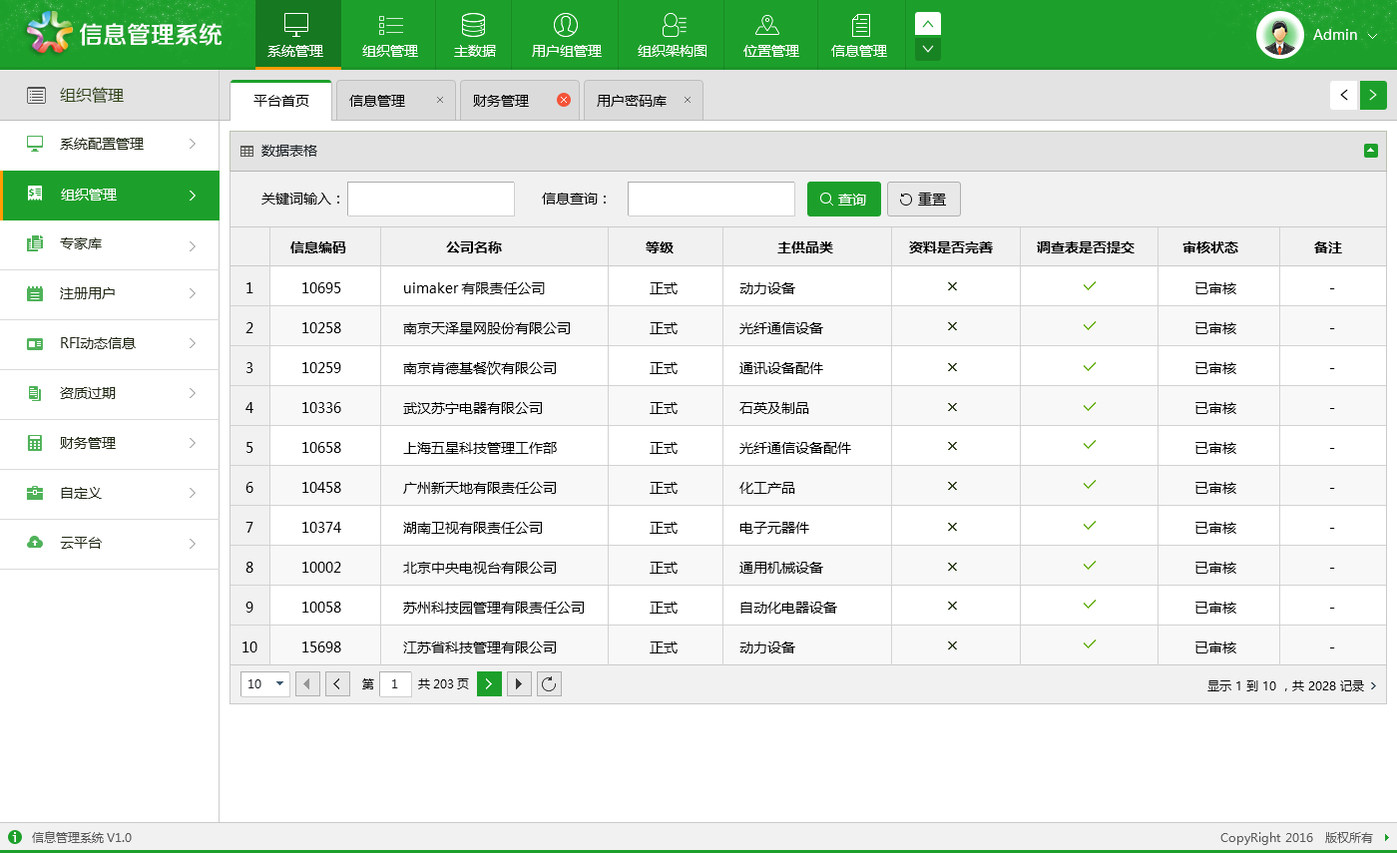
<style>
.page{position:relative;width:1397px;height:853px;background:#ffffff}
.page>*{position:absolute;margin:0}
.t1{font:24px "FZZZHUNHJW--GB1-0";color:#ffffff}
.t2{font:14px "MicrosoftYaHei";color:#ffffff}
.t3{font:16px "MicrosoftYaHei";color:#2d4112}
.t4{font:14px "MicrosoftYaHei";color:#000000}
.t5{font:14px/49.9px "MicrosoftYaHei";color:#202913}
.t6{font:14px "MicrosoftYaHei";color:#171e24}
.t7{font:14px "MicrosoftYaHei-Bold";color:#000000}
.t8{font:14px/39.9px "MicrosoftYaHei";color:#000000}
.t9{font:12px "MicrosoftYaHei";color:#171e24}
.t10{font:12px "MicrosoftYaHei";color:#000000}
.t11{font:12px "HeitiCSEG";color:#ffffff}
.t12{font:12px "MicrosoftYaHei";color:#585858}
</style>
<div class="page">
<p class="t1" style="left:80px;top:23px;width:142px;height:23px">信息管理系统</p>
<p class="t2" style="left:1313px;top:29px;width:44px;height:11px">Admin</p>
<p class="t2" style="left:267px;top:45px;width:56px;height:12px">系统管理</p>
<p class="t2" style="left:362px;top:45px;width:525px;height:12px">组织管理         主数据         用户组管理         组织架构图         位置管理        信息管理</p>
<p class="t3" style="left:60px;top:87px;width:64px;height:17px">组织管理</p>
<p class="t4" style="left:254px;top:95px;width:55px;height:12px">平台首页</p>
<p class="t4" style="left:349px;top:95px;width:56px;height:12px">信息管理</p>
<p class="t4" style="left:473px;top:95px;width:56px;height:12px">财务管理</p>
<p class="t4" style="left:597px;top:95px;width:70px;height:12px">用户密码库</p>
<p class="t5" style="left:60px;top:138px;width:84px;height:411px">系统配置管理<br><br>专家库<br>注册用户<br>RFI动态信息<br>资质过期<br>财务管理<br>自定义<br>云平台</p>
<p class="t6" style="left:261px;top:145px;width:56px;height:12px">数据表格</p>
<p class="t2" style="left:61px;top:189px;width:56px;height:12px">组织管理</p>
<p class="t4" style="left:261px;top:193px;width:78px;height:12px">关键词输入：</p>
<p class="t4" style="left:542px;top:193px;width:64px;height:12px">信息查询：</p>
<p class="t2" style="left:838px;top:194px;width:28px;height:12px">查询</p>
<p class="t4" style="left:918px;top:193px;width:28px;height:13px">重置</p>
<p class="t7" style="left:290px;top:242px;width:1052px;height:12px">信息编码                         公司名称                                    等级                          主供品类                   资料是否完善           调查表是否提交            审核状态                   备注</p>
<p class="t8" style="left:243px;top:282px;width:15px;height:371px;text-align:center">1<br>2<br>3<br>4<br>5<br>6<br>7<br>8<br>9<br>10</p>
<p class="t8" style="left:302px;top:282px;width:39px;height:371px">10695<br>10258<br>10259<br>10336<br>10658<br>10458<br>10374<br>10002<br>10058<br>15698</p>
<p class="t8" style="left:403px;top:282px;width:181px;height:372px">uimaker有限责任公司<br>南京天泽星网股份有限公司<br>南京肯德基餐饮有限公司<br>武汉苏宁电器有限公司<br>上海五星科技管理工作部<br>广州新天地有限责任公司<br>湖南卫视有限责任公司<br>北京中央电视台有限公司<br>苏州科技园管理有限责任公司<br>江苏省科技管理有限公司</p>
<p class="t8" style="left:650px;top:282px;width:28px;height:372px">正式<br>正式<br>正式<br>正式<br>正式<br>正式<br>正式<br>正式<br>正式<br>正式</p>
<p class="t8" style="left:740px;top:282px;width:111px;height:372px">动力设备<br>光纤通信设备<br>通讯设备配件<br>石英及制品<br>光纤通信设备配件<br>化工产品<br>电子元器件<br>通用机械设备<br>自动化电器设备<br>动力设备</p>
<p class="t8" style="left:1196px;top:282px;width:41px;height:372px">已审核<br>已审核<br>已审核<br>已审核<br>已审核<br>已审核<br>已审核<br>已审核<br>已审核<br>已审核</p>
<p class="t8" style="left:1330px;top:288px;width:5px;height:361px">-<br>-<br>-<br>-<br>-<br>-<br>-<br>-<br>-<br>-</p>
<p class="t9" style="left:249px;top:680px;width:12px;height:9px">10</p>
<p class="t10" style="left:362px;top:679px;width:107px;height:11px">第           共203页</p>
<p class="t9" style="left:392px;top:680px;width:6px;height:9px">1</p>
<p class="t10" style="left:1208px;top:681px;width:156px;height:11px">显示 1 到 10 ，共 2028 记录</p>
<p class="t11" style="left:12px;top:832px;width:4px;height:10px">i</p>
<p class="t12" style="left:32px;top:831px;width:100px;height:12px">信息管理系统V1.0</p>
<p class="t12" style="left:1221px;top:832px;width:152px;height:13px">CopyRight 2016   版权所有</p>
</div>
